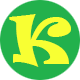
<style>
.page{position:relative;width:80px;height:80px;background:#22b14c}
.page>*{position:absolute;margin:0}
.t1{font:64px "Ravie";color:#f8ff33}
</style>
<div class="page">
<p class="t1" style="left:9px;top:14px;width:62px;height:53px">K</p>
</div>
